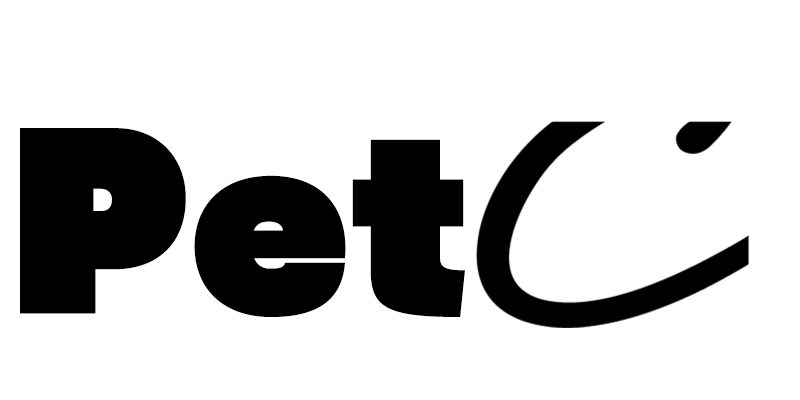
<style>
.page{position:relative;width:800px;height:400px;background:#ffffff}
.page>*{position:absolute;margin:0}
.t1{font:237.4px "RaglanStd-UB";color:#000000}
</style>
<div class="page">
<p class="t1" style="left:20px;top:128px;width:445px;height:189px">Pet</p>
</div>
